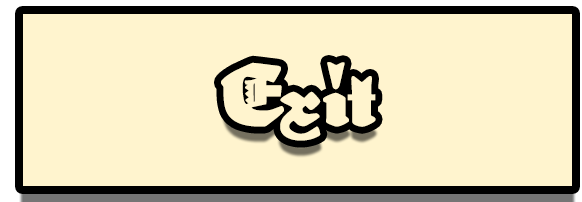
<style>
.page{position:relative;width:582px;height:202px;background:#fff4ce}
.page>*{position:absolute;margin:0}
.t1{font:79.9px "Neptun";color:#fff4ce}
</style>
<div class="page">
<p class="t1" style="left:221px;top:62px;width:155px;height:79px">Exit</p>
</div>
